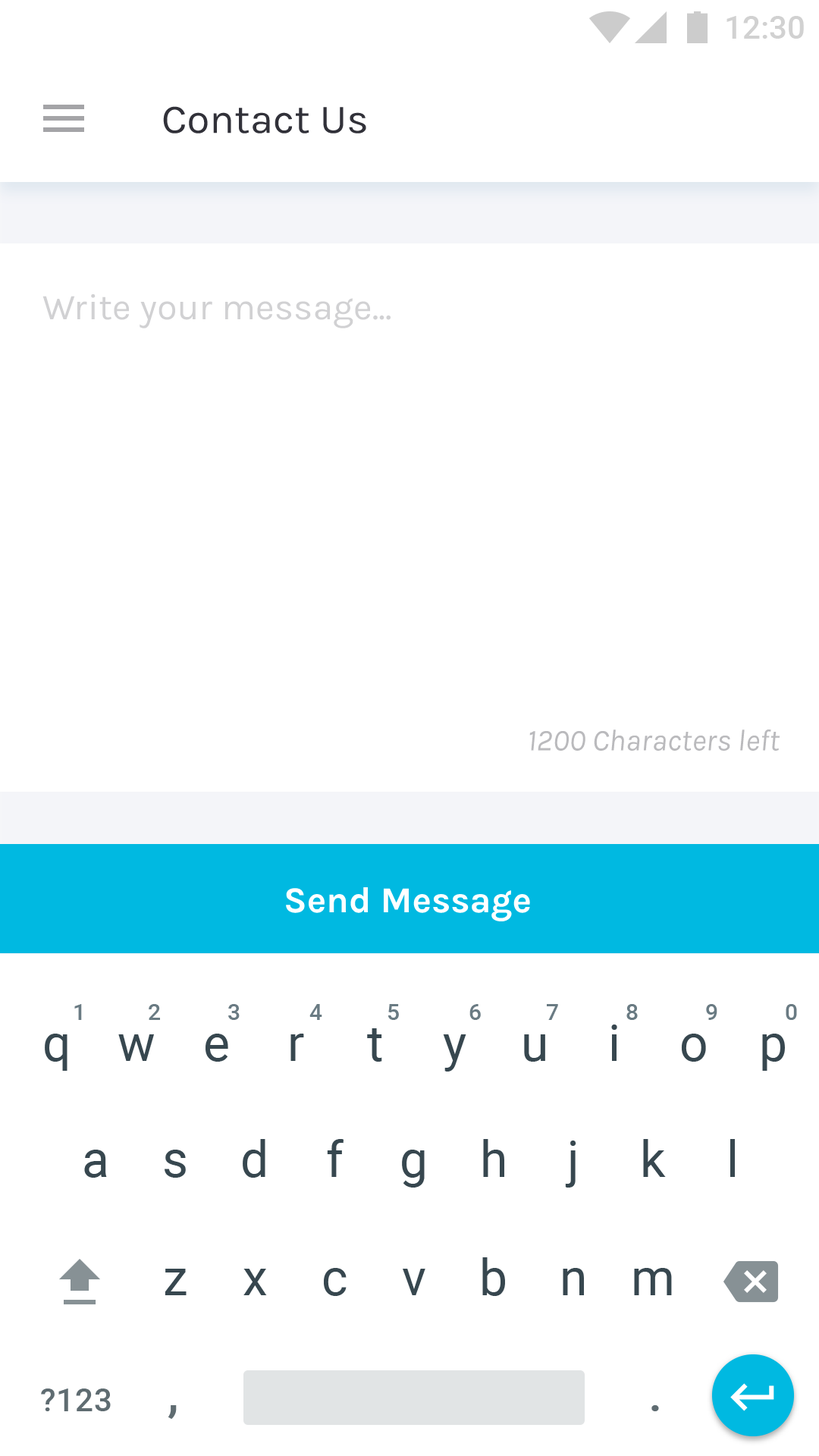
<style>
.page{position:relative;width:819px;height:1456px;background:#ffffff}
.page>*{position:absolute;margin:0}
.t1{font:40.9px "Karla-Regular";color:#1b1b24}
.t2{font:36.5px "Karla-Regular";color:#d1d1d3}
.t3{font:30.3px "Karla-Italic";color:#bababd}
.t4{font:36.4px "Karla-Bold";color:#ffffff}
</style>
<div class="page">
<p class="t1" style="left:163px;top:106px;width:203px;height:27px;opacity:0.9">Contact Us</p>
<p class="t2" style="left:42px;top:294px;width:349px;height:34px">Write your message...</p>
<p class="t3" style="left:529px;top:730px;width:251px;height:21px">1200 Characters left</p>
<p class="t4" style="left:286px;top:887px;width:244px;height:34px">Send Message</p>
</div>
